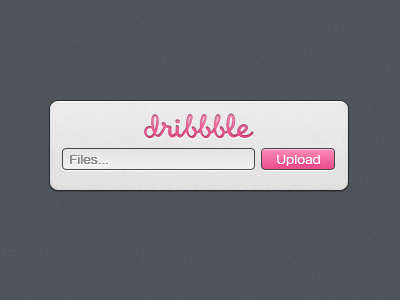
<style>
.page{position:relative;width:400px;height:300px;background:#50565d}
.page>*{position:absolute;margin:0}
.t1{font:12.5px "HelveticaNeue";color:#848484;scale:1.1 1}
.t2{font:12.5px "HelveticaNeue";color:#ffffff;scale:1.1 1}
</style>
<div class="page">
<p class="t1" style="left:70px;top:155px;width:38px;height:9px">Files...</p>
<p class="t2" style="left:277px;top:155px;width:43px;height:11px">Upload</p>
</div>
